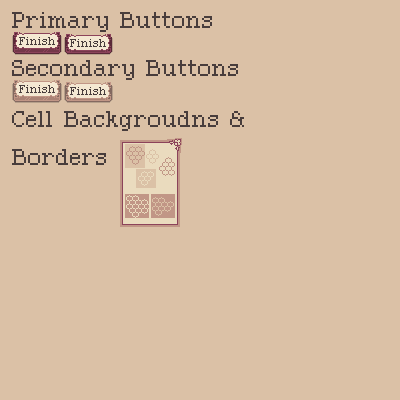
<style>
.page{position:relative;width:400px;height:400px;background:#dbc1a6}
.page>*{position:absolute;margin:0}
.t1{font:32px "Pixolde";color:#483d3c}
</style>
<div class="page">
<p class="t1" style="left:12px;top:12px;width:200px;height:20px">Primary Buttons</p>
<p class="t1" style="left:12px;top:60px;width:226px;height:20px">Secondary Buttons</p>
<p class="t1" style="left:12px;top:111px;width:232px;height:54px">Cell Backgroudns &amp; <br>Borders</p>
</div>
